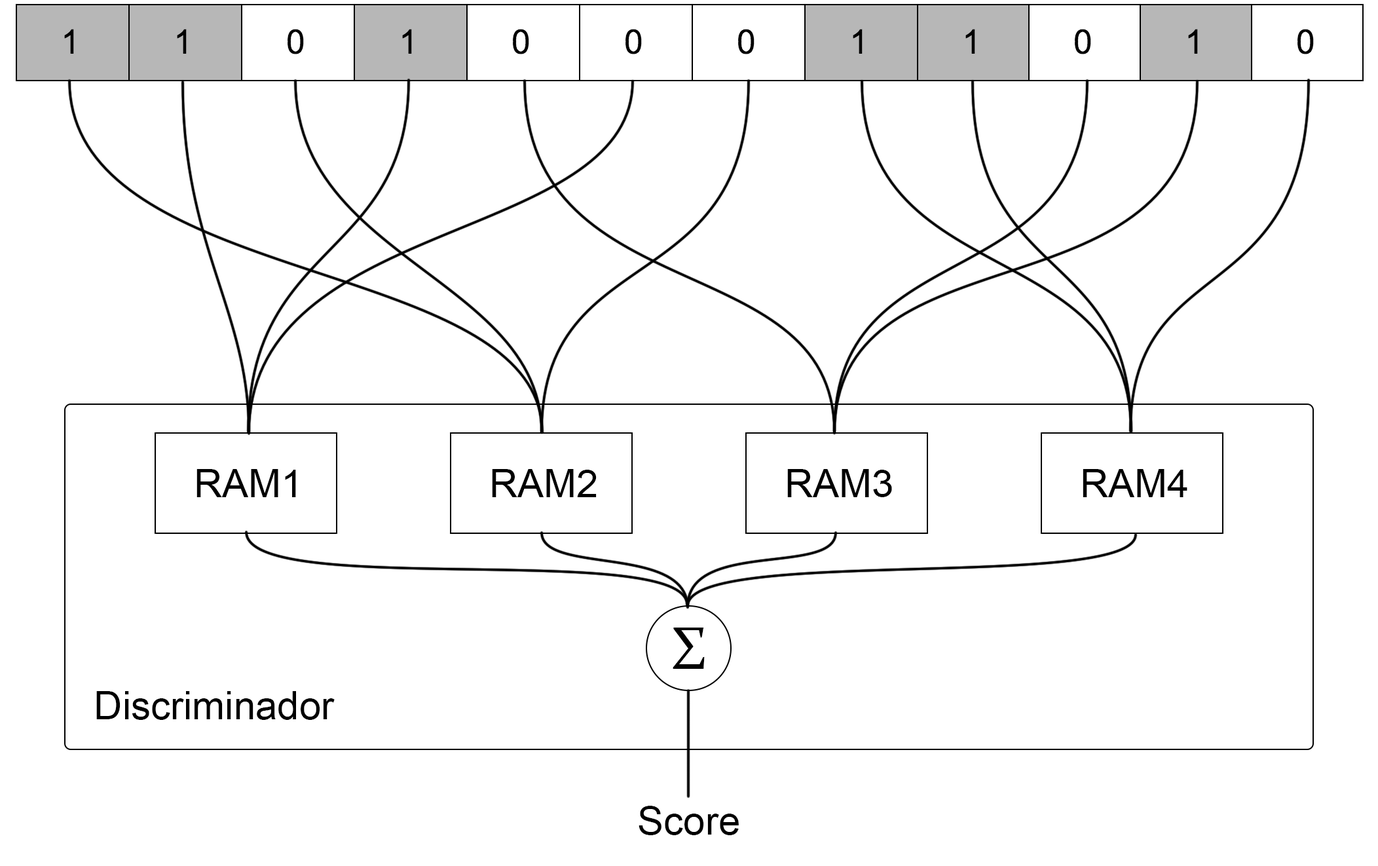
<style>
.page{position:relative;width:1378px;height:866px;background:#ffffff}
.page>*{position:absolute;margin:0}
.t1{font:39.3px "ArialMT";color:#000000}
.t2{font:58.9px "Constantia";color:#000000}
</style>
<div class="page">
<p class="t1" style="left:196px;top:469px;width:100px;height:28px">RAM1</p>
<p class="t1" style="left:492px;top:469px;width:104px;height:28px">RAM2</p>
<p class="t1" style="left:787px;top:469px;width:105px;height:28px">RAM3</p>
<p class="t1" style="left:1082px;top:469px;width:105px;height:28px">RAM4</p>
<p class="t2" style="left:672px;top:627px;width:33px;height:42px">Σ</p>
<p class="t1" style="left:96px;top:691px;width:239px;height:29px">Discriminador</p>
<p class="t1" style="left:638px;top:805px;width:101px;height:30px">Score</p>
</div>
